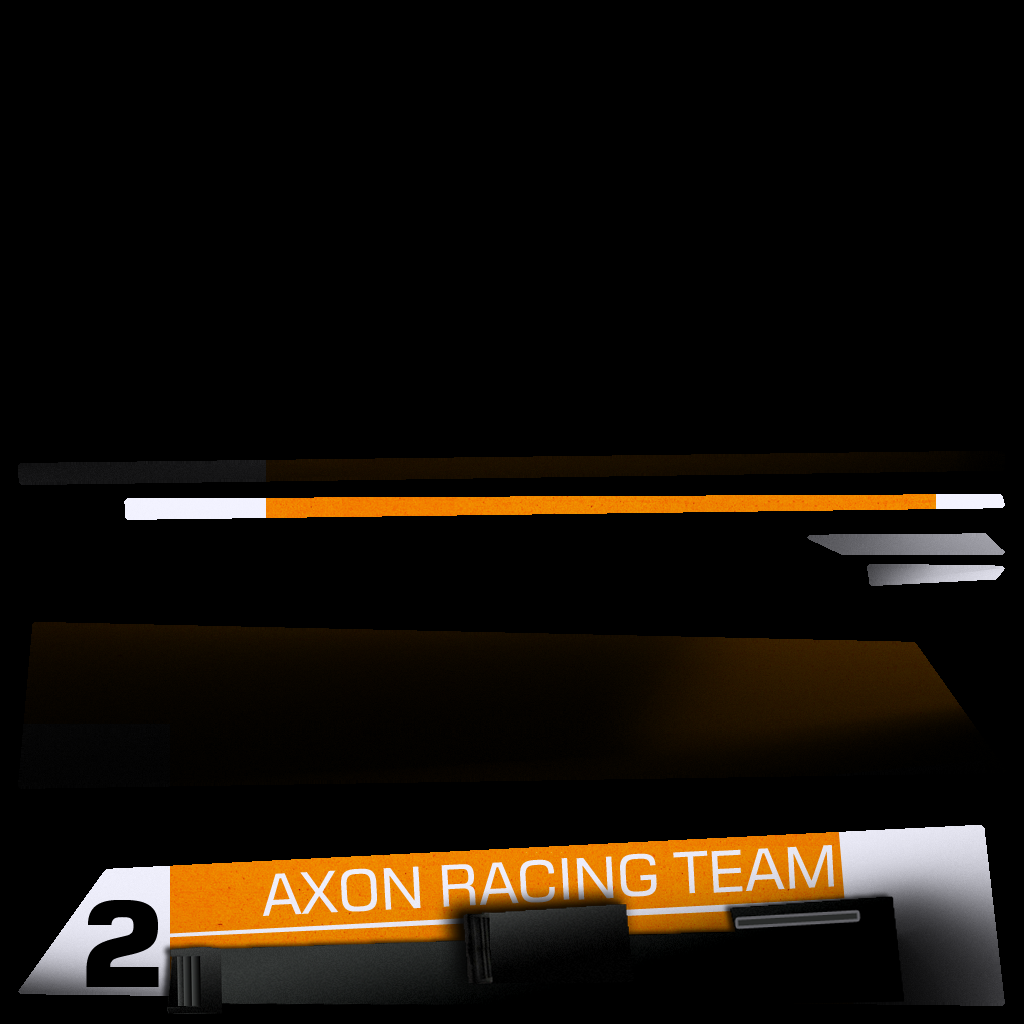
<style>
.page{position:relative;width:1024px;height:1024px;background:#000000}
.page>*{position:absolute;margin:0}
.t1{font:57px "Moire";color:#ffffff;scale:0.96 1}
.t2{font:119px "Moire-ExtraBold";color:#000000;scale:0.96 1}
</style>
<div class="page">
<p class="t1" style="left:263px;top:845px;width:571px;height:71px;rotate:-3deg">AXON RACING TEAM</p>
<p class="t2" style="left:86px;top:900px;width:73px;height:87px">2</p>
</div>
